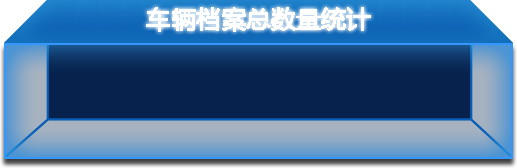
<style>
.page{position:relative;width:517px;height:168px;background:#07224d}
.page>*{position:absolute;margin:0}
.t1{font:24px "MicrosoftYaHei";color:#ffffff;font-weight:bold}
</style>
<div class="page">
<p class="t1" style="left:146px;top:7px;width:225px;height:25px">车辆档案总数量统计</p>
</div>
